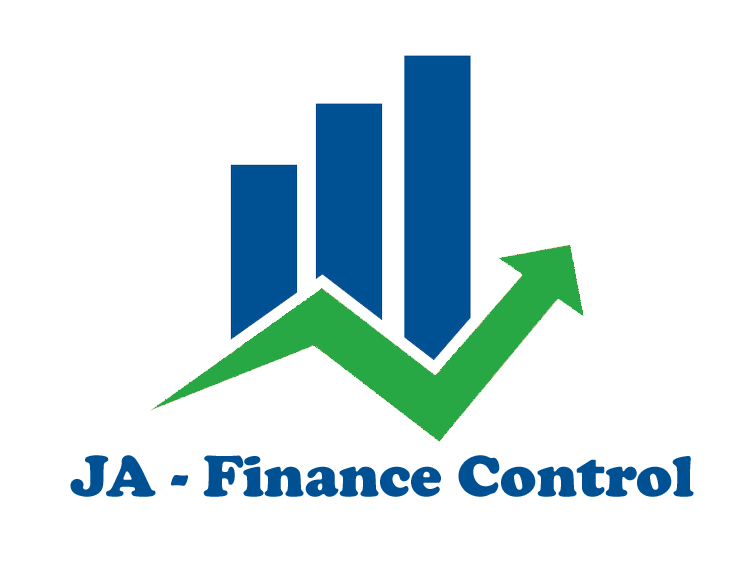
<style>
.page{position:relative;width:740px;height:587px;background:#ffffff}
.page>*{position:absolute;margin:0}
.t1{font:60px "CooperBlack";color:#015294}
</style>
<div class="page">
<p class="t1" style="left:70px;top:455px;width:624px;height:42px">JA - Finance Control</p>
</div>
